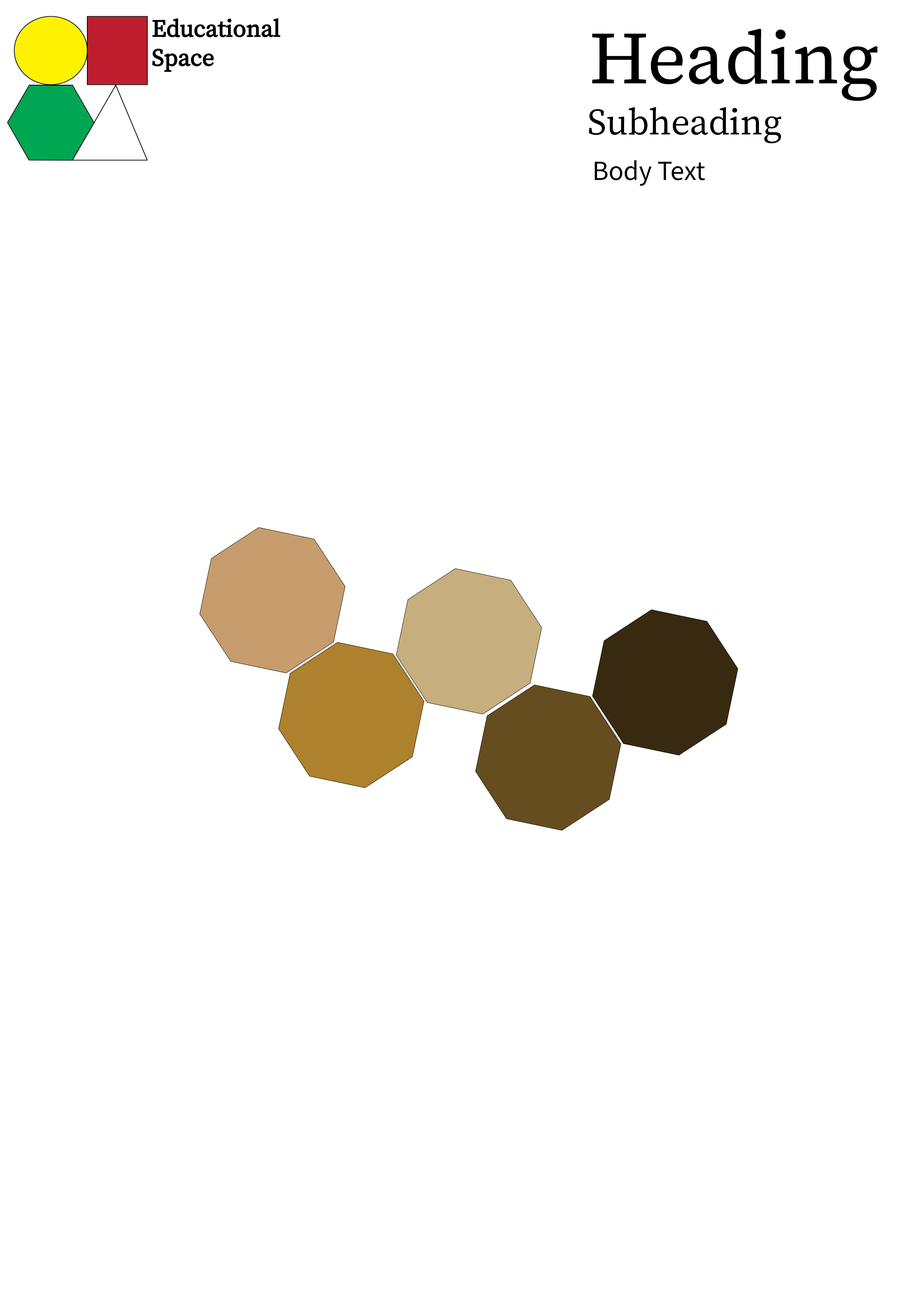
<style>
.page{position:relative;width:918px;height:1299px;background:#ffffff}
.page>*{position:absolute;margin:0}
.t1{font:74px "SourceSerif4Roman-SmText";color:#000000}
.t2{font:37px "SourceSerif4Variable-Roman";color:#000000}
.t3{font:27.8px "SourceSansRoman-Regular";color:#000000}
</style>
<div class="page">
<p class="t1" style="left:592px;top:29px;width:286px;height:72px">Heading</p>
<p class="t2" style="left:589px;top:107px;width:193px;height:36px">Subheading</p>
<p class="t3" style="left:595px;top:160px;width:110px;height:26px">Body Text</p>
</div>
